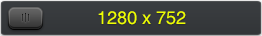
<style>
.page{position:relative;width:262px;height:36px}
.page>*{position:absolute;margin:0}
.t1{font:18px "Helvetica";color:#eefd00}
</style>
<div class="page">
<p class="t1" style="left:98px;top:11px;width:88px;height:14px">1280 x 752</p>
</div>
